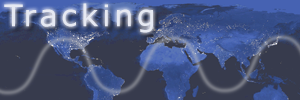
<style>
.page{position:relative;width:300px;height:100px;background:#373b4d}
.page>*{position:absolute;margin:0}
.t1{font:30px "MSReferenceSansSerif";letter-spacing:0.125em;color:#e6e9f2}
</style>
<div class="page">
<p class="t1" style="left:4px;top:3px;width:149px;height:30px">Tracking</p>
</div>
